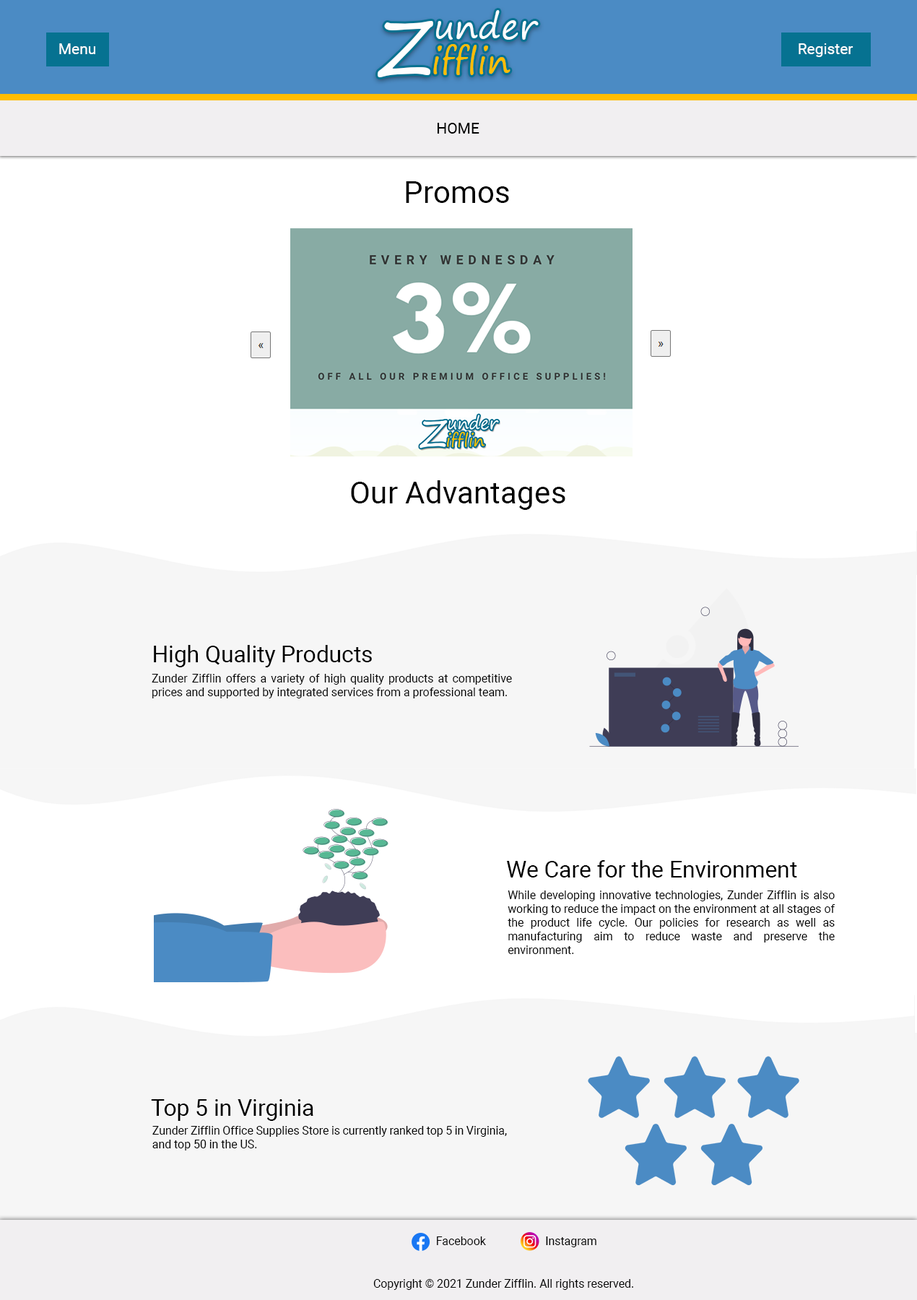
<style>
.page{position:relative;width:917px;height:1300px;background:#ffffff}
.page>*{position:absolute;margin:0}
.t1{font:34.8px "SegoePrint";color:#fefefe}
.t2{font:77.6px "SegoePrint";color:#fefefe}
.t3{font:15.3px "Roboto-Regular";color:#ffffff}
.t4{font:34.8px "SegoePrint";color:#ffbd01}
.t5{font:15.3px "Roboto-Regular";color:#000000}
.t6{font:30.6px "Roboto-Regular";color:#000000}
.t7{font:22.9px "Roboto-Regular";color:#000000}
.t8{font:11.5px "Roboto-Regular";color:#000000}
</style>
<div class="page">
<p class="t1" style="left:436px;top:10px;width:103px;height:30px">under</p>
<p class="t2" style="left:378px;top:21px;width:55px;height:56px">Z</p>
<p class="t3" style="left:59px;top:43px;width:36px;height:11px">Menu</p>
<p class="t4" style="left:433px;top:44px;width:78px;height:31px">ifflin</p>
<p class="t3" style="left:799px;top:43px;width:55px;height:14px">Register</p>
<p class="t5" style="left:437px;top:123px;width:43px;height:11px">HOME</p>
<p class="t6" style="left:406px;top:181px;width:103px;height:22px">Promos</p>
<p class="t6" style="left:351px;top:480px;width:215px;height:30px">Our Advantages</p>
<p class="t7" style="left:154px;top:645px;width:218px;height:22px">High Quality Products</p>
<p class="t8" style="left:152px;top:674px;width:360px;height:24px;text-align:justify">Zunder Zifflin offers a variety of high quality products at competitive prices and supported by integrated services from a professional team.</p>
<p class="t7" style="left:507px;top:860px;width:290px;height:18px">We Care for the Environment</p>
<p class="t8" style="left:508px;top:891px;width:328px;height:63px;text-align:justify">While developing innovative technologies, Zunder Zifflin is also working to reduce the impact on the environment at all stages of the product life cycle. Our policies for research as well as manufacturing aim to reduce waste and preserve the environment.</p>
<p class="t7" style="left:151px;top:1099px;width:162px;height:22px">Top 5 in Virginia</p>
<p class="t8" style="left:152px;top:1126px;width:355px;height:25px;text-align:justify">Zunder Zifflin Office Supplies Store is currently ranked top 5 in Virginia, and top 50 in the US.</p>
<p class="t8" style="left:437px;top:1236px;width:49px;height:9px">Facebook</p>
<p class="t8" style="left:546px;top:1236px;width:51px;height:11px">Instagram</p>
<p class="t8" style="left:373px;top:1279px;width:260px;height:11px">Copyright © 2021 Zunder Zifflin. All rights reserved.</p>
</div>
